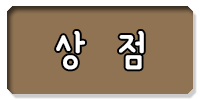
<style>
.page{position:relative;width:200px;height:100px;background:#907353}
.page>*{position:absolute;margin:0}
.t1{font:48.9px "YanoljaYacheR";color:#ffffff}
</style>
<div class="page">
<p class="t1" style="left:56px;top:31px;width:88px;height:39px">상   점</p>
</div>
